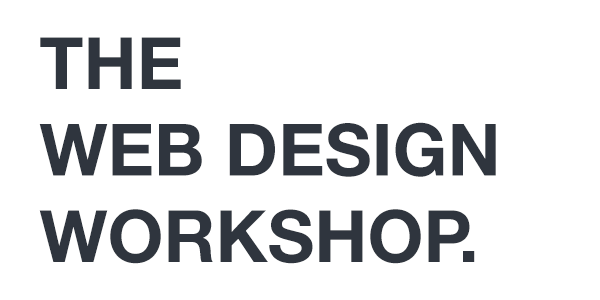
<style>
.page{position:relative;width:600px;height:300px;background:#ffffff}
.page>*{position:absolute;margin:0}
.t1{font:72px "HelveticaNeue-Bold";color:#2f353e}
</style>
<div class="page">
<p class="t1" style="left:39px;top:37px;width:457px;height:227px">THE<br>WEB DESIGN<br>WORKSHOP.</p>
</div>
